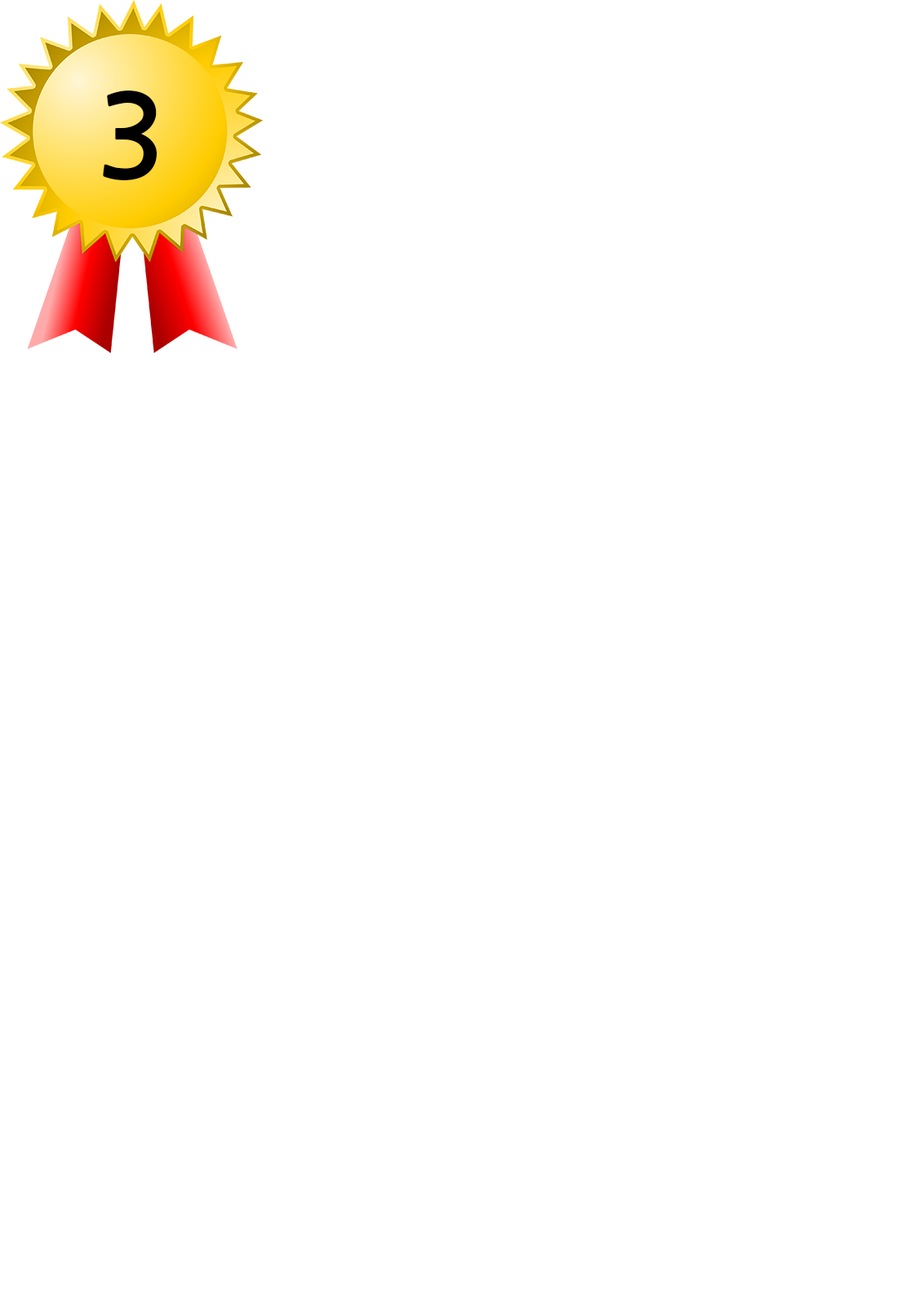
<style>
.page{position:relative;width:914px;height:1305px;background:#ffffff}
.page>*{position:absolute;margin:0}
.t1{font:115.2px "NanumGothicBold";color:#000000}
</style>
<div class="page">
<p class="t1" style="left:103px;top:91px;width:54px;height:89px">3</p>
</div>
